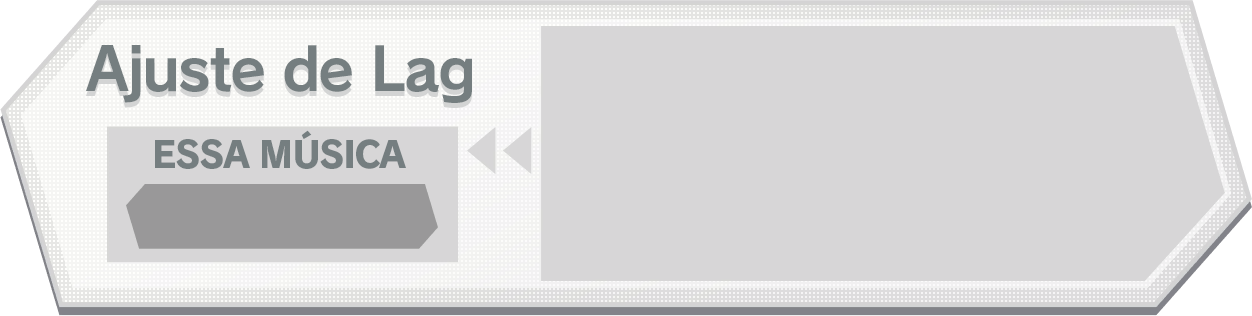
<style>
.page{position:relative;width:1252px;height:316px;background:#d7d6d7}
.page>*{position:absolute;margin:0}
.t1{font:58.7px "RodinPro-B";letter-spacing:-0.036em;color:#757e80}
.t2{font:36px "RodinPro-EB";letter-spacing:-0.051em;color:#757e80}
</style>
<div class="page">
<p class="t1" style="left:86px;top:45px;width:386px;height:58px">Ajuste de Lag</p>
<p class="t2" style="left:155px;top:130px;width:251px;height:39px">ESSA MÚSICA</p>
</div>
